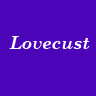
<style>
.page{position:relative;width:96px;height:96px;background:#4c04b9}
.page>*{position:absolute;margin:0}
.t1{font:18px "CenturySchoolbook-BoldItalic";color:#fffffe}
</style>
<div class="page">
<p class="t1" style="left:9px;top:36px;width:81px;height:13px">Lovecust</p>
</div>
